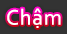
<style>
.page{position:relative;width:67px;height:34px;background:#333333}
.page>*{position:absolute;margin:0}
.t1{font:22px "Corbel";letter-spacing:0.035em;color:#ffffff}
</style>
<div class="page">
<p class="t1" style="left:7px;top:8px;width:54px;height:20px">Chậm</p>
</div>
